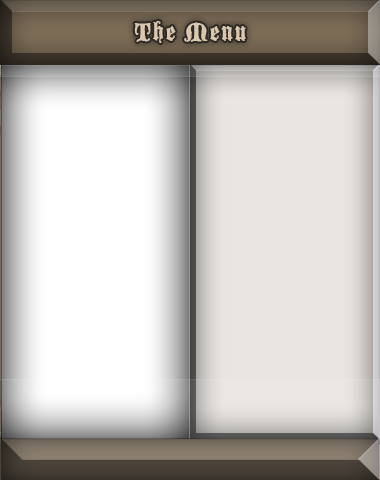
<style>
.page{position:relative;width:380px;height:480px}
.page>*{position:absolute;margin:0}
.t1{font:28px "BlackmoorLetPlain";letter-spacing:0.045em;color:#dac7b0}
</style>
<div class="page">
<p class="t1" style="left:134px;top:21px;width:112px;height:22px">The Menu</p>
</div>
